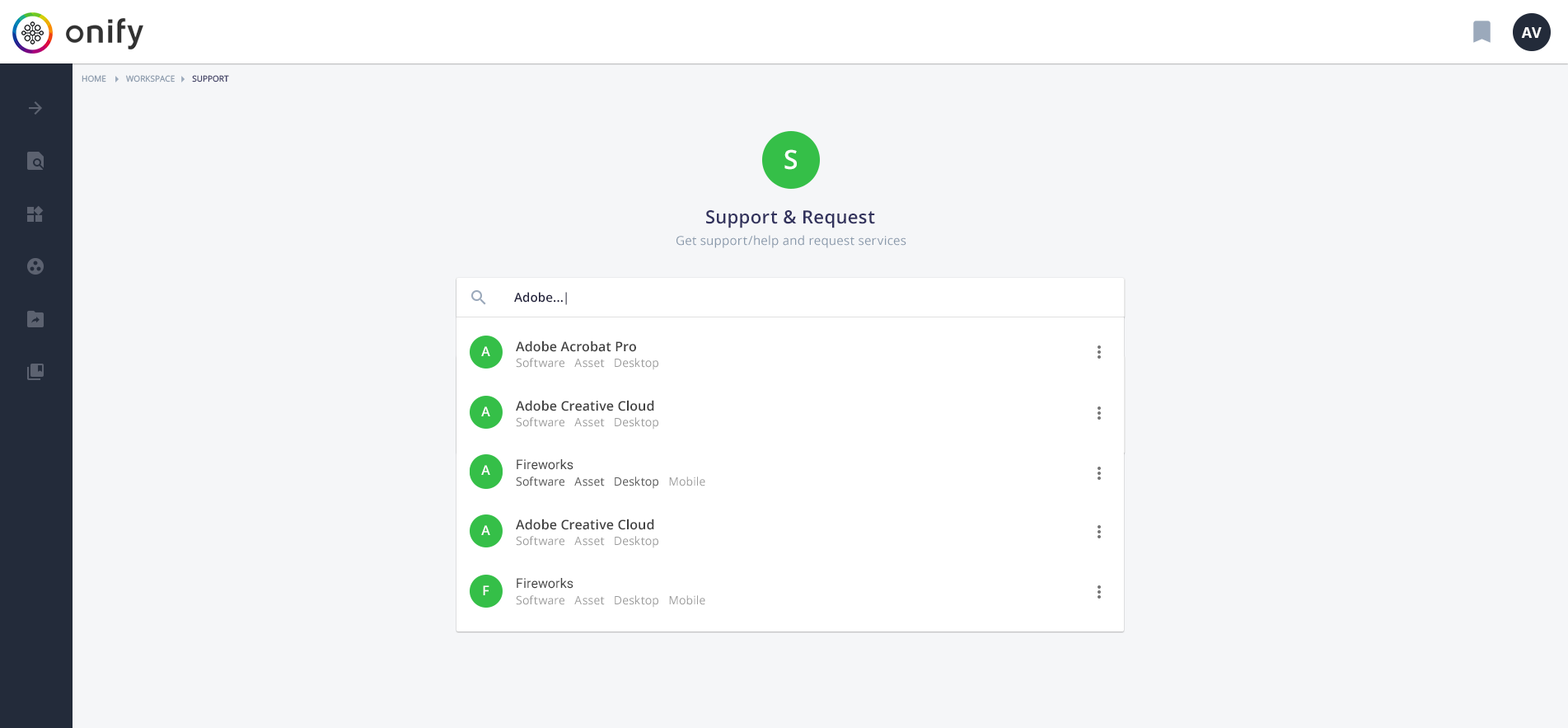
<style>
.page{position:relative;width:1568px;height:728px;background:#f5f6f8}
.page>*{position:absolute;margin:0}
.t1{font:14.8px "OpenSans-Bold";color:#ffffff;text-transform:uppercase}
.t2{font:8.2px "OpenSans";color:#8898aa;text-transform:uppercase}
.t3{font:8.2px "OpenSans";color:#32325d;text-transform:uppercase}
.t4{font:26.4px "OpenSans-Semibold";letter-spacing:0.005em;color:#ffffff}
.t5{font:18.1px "OpenSans-Semibold";letter-spacing:0.02em;color:#32325d}
.t6{font:12.4px "OpenSans";letter-spacing:0.02em;color:#8898aa}
.t7{font:12.4px "OpenSans-Semibold";letter-spacing:0.01em;color:#23233d}
.t8{font:13.2px "OpenSans-Semibold";letter-spacing:0.01em;color:#404040}
.t9{font:13.2px "OpenSans-Semibold";letter-spacing:0.01em;color:#ffffff}
.t10{font:11.5px "OpenSans";letter-spacing:0.01em;color:#9a9a9a}
.t11{font:13.2px "Roboto-Regular";letter-spacing:0.01em;color:#404040}
.t12{font:11.5px "OpenSans";letter-spacing:0.01em;color:#5b5b5b}
</style>
<div class="page">
<p class="t1" style="left:1521px;top:27px;width:21px;height:11px">AV</p>
<p class="t2" style="left:82px;top:75px;width:24px;height:7px">Home</p>
<p class="t2" style="left:126px;top:75px;width:49px;height:7px">Workspace</p>
<p class="t3" style="left:192px;top:75px;width:37px;height:7px">support</p>
<p class="t4" style="left:784px;top:149px;width:13px;height:21px">S</p>
<p class="t5" style="left:706px;top:210px;width:169px;height:18px">Support &amp; Request</p>
<p class="t6" style="left:676px;top:235px;width:230px;height:13px">Get support/help and request services</p>
<p class="t7" style="left:514px;top:292px;width:53px;height:13px">Adobe...|</p>
<p class="t8" style="left:516px;top:340px;width:120px;height:12px">Adobe Acrobat Pro</p>
<p class="t9" style="left:481px;top:346px;width:9px;height:10px">A</p>
<p class="t10" style="left:516px;top:358px;width:142px;height:12px">Software   Asset   Desktop</p>
<p class="t8" style="left:516px;top:400px;width:138px;height:11px">Adobe Creative Cloud</p>
<p class="t9" style="left:481px;top:406px;width:9px;height:10px">A</p>
<p class="t10" style="left:516px;top:417px;width:142px;height:12px">Software   Asset   Desktop</p>
<p class="t11" style="left:517px;top:459px;width:56px;height:11px">Fireworks</p>
<p class="t9" style="left:481px;top:465px;width:9px;height:10px">A</p>
<p class="t12" style="left:516px;top:476px;width:189px;height:13px">Software   Asset   Desktop   Mobile</p>
<p class="t12" style="left:516px;top:476px;width:142px;height:13px">Software   Asset   Desktop</p>
<p class="t8" style="left:516px;top:518px;width:138px;height:12px">Adobe Creative Cloud</p>
<p class="t9" style="left:481px;top:525px;width:9px;height:10px">A</p>
<p class="t10" style="left:516px;top:536px;width:142px;height:12px">Software   Asset   Desktop</p>
<p class="t11" style="left:517px;top:578px;width:56px;height:10px">Fireworks</p>
<p class="t9" style="left:483px;top:585px;width:6px;height:10px">F</p>
<p class="t10" style="left:516px;top:595px;width:189px;height:12px">Software   Asset   Desktop   Mobile</p>
</div>
